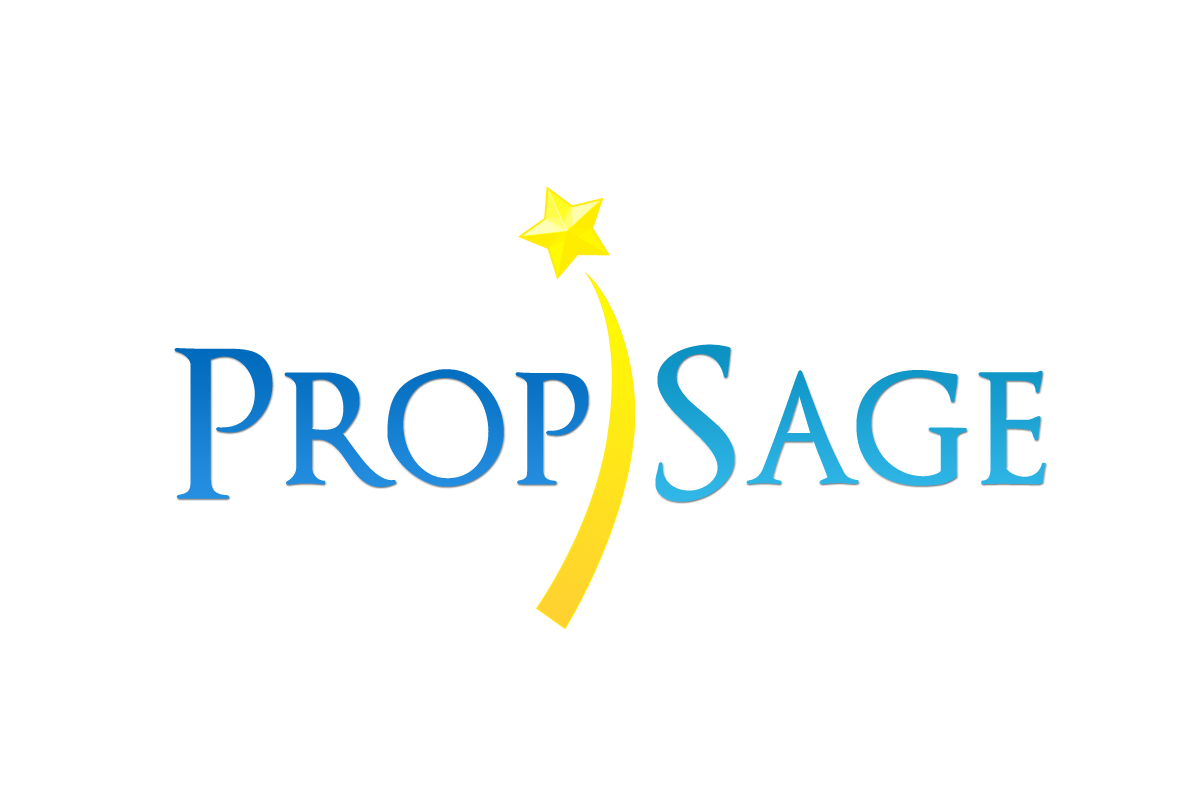
<style>
.page{position:relative;width:1200px;height:800px;background:#ffffff}
.page>*{position:absolute;margin:0}
.t1{font:200px "OptimusPrinceps";font-weight:bold}
</style>
<div class="page">
<p class="t1" style="left:174px;top:344px;width:872px;height:158px">Prop Sage</p>
</div>
